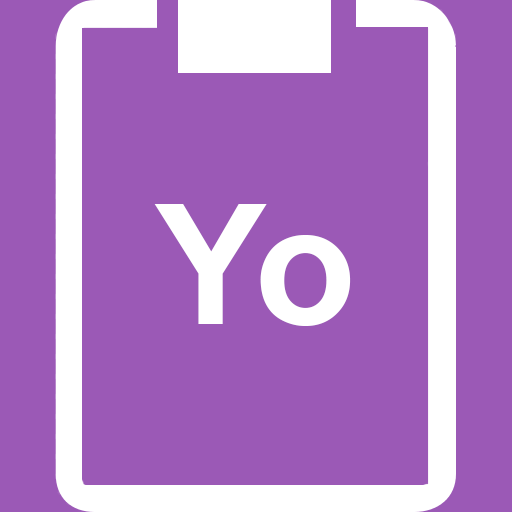
<style>
.page{position:relative;width:512px;height:512px;background:#9b59b6}
.page>*{position:absolute;margin:0}
.t1{font:167px "Arial-BoldMT";color:#ffffff}
</style>
<div class="page">
<p class="t1" style="left:154px;top:204px;width:197px;height:122px">Yo</p>
</div>
